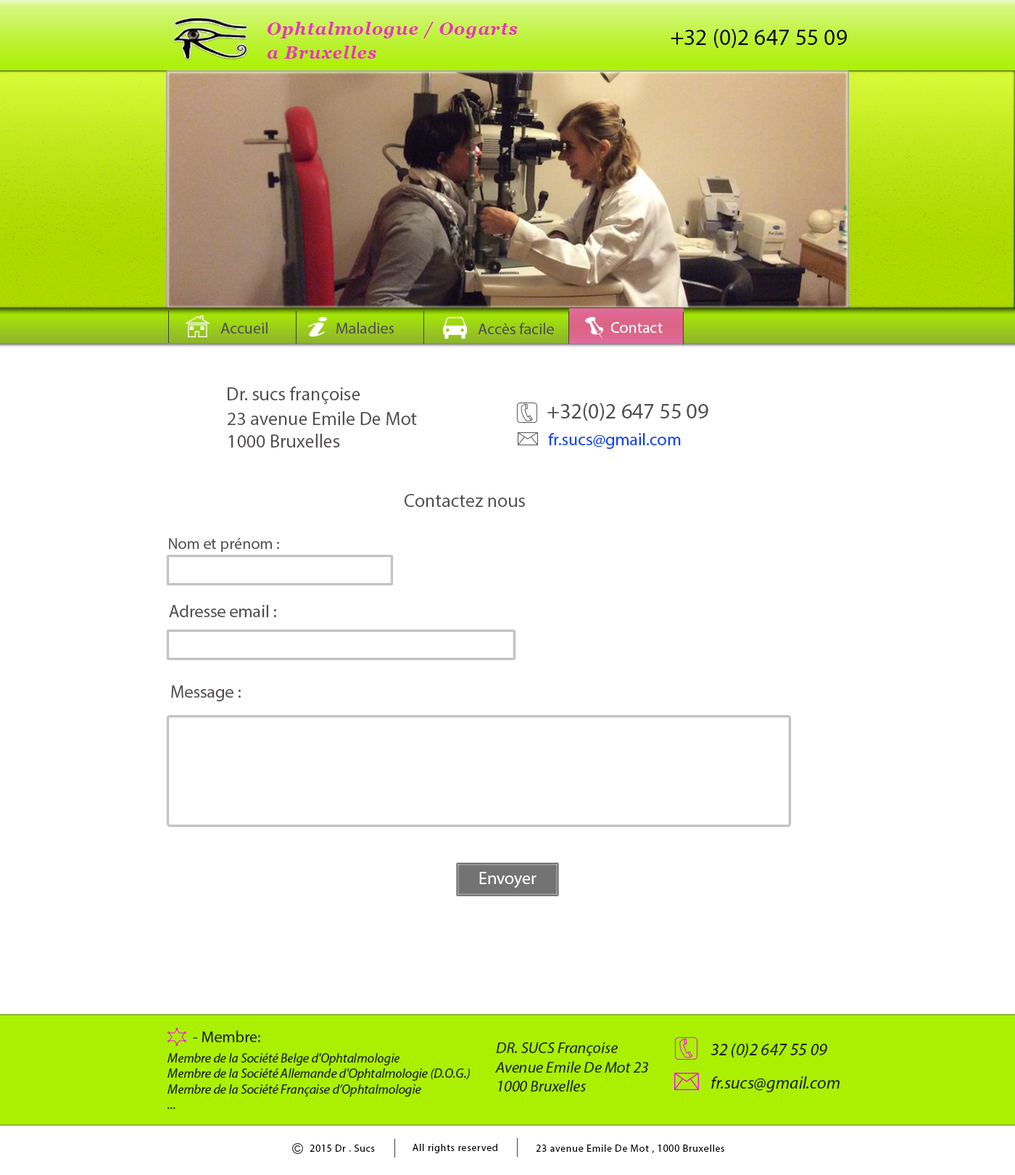
<style>
.page{position:relative;width:1015px;height:1175px;background:#ffffff}
.page>*{position:absolute;margin:0}
.t1{font:17.4px "Georgia-BoldItalic";letter-spacing:0.05em;color:#eb35b7}
.t2{font:23.2px "MyriadPro-Regular";color:#040003}
.t3{font:16px "MyriadPro-Regular";color:#514d50}
.t4{font:16px "MyriadPro-Regular";color:#fdfcfd}
.t5{font:18.9px "MyriadPro-Regular";color:#514d50}
.t6{font:21.8px "MyriadPro-Regular";color:#514d50}
.t7{font:17.4px "MyriadPro-Regular";color:#0840f7}
.t8{font:17.4px "MyriadPro-Regular";color:#514d50}
.t9{font:17.4px "MyriadPro-Regular";color:#fefdfe}
.t10{font:16px "MyriadPro-Regular";color:#191919}
.t11{font:16px "MyriadPro-It";color:#191919}
.t12{font:17.4px "MyriadPro-It";color:#191919}
.t13{font:13.1px "MyriadPro-It";color:#191919}
.t14{font:10.2px "MyriadPro-Regular";letter-spacing:0.05em;color:#000000}
</style>
<div class="page">
<p class="t1" style="left:268px;top:22px;width:250px;height:16px">Ophtalmologue / Oogarts</p>
<p class="t2" style="left:671px;top:29px;width:176px;height:19px">+32 (0)2 647 55 09</p>
<p class="t1" style="left:267px;top:46px;width:109px;height:13px">a Bruxelles</p>
<p class="t3" style="left:220px;top:322px;width:48px;height:12px">Accueil</p>
<p class="t3" style="left:336px;top:322px;width:58px;height:12px">Maladies</p>
<p class="t3" style="left:478px;top:323px;width:76px;height:11px">Accès facile</p>
<p class="t4" style="left:611px;top:322px;width:52px;height:11px">Contact</p>
<p class="t5" style="left:228px;top:386px;width:132px;height:18px">Dr. sucs françoise</p>
<p class="t5" style="left:228px;top:411px;width:189px;height:36px">23 avenue Emile De Mot<br>1000 Bruxelles</p>
<p class="t6" style="left:547px;top:402px;width:161px;height:19px">+32(0)2 647 55 09</p>
<p class="t7" style="left:548px;top:433px;width:133px;height:16px">fr.sucs@gmail.com</p>
<p class="t5" style="left:405px;top:494px;width:120px;height:13px">Contactez nous</p>
<p class="t3" style="left:169px;top:537px;width:110px;height:15px">Nom et prénom :</p>
<p class="t8" style="left:169px;top:605px;width:107px;height:12px">Adresse email :</p>
<p class="t8" style="left:171px;top:685px;width:70px;height:16px">Message :</p>
<p class="t9" style="left:479px;top:872px;width:58px;height:16px">Envoyer</p>
<p class="t10" style="left:193px;top:1030px;width:67px;height:12px">- Membre:</p>
<p class="t11" style="left:495px;top:1042px;width:154px;height:49px">DR. SUCS Françoise<br>Avenue Emile De Mot 23<br>1000 Bruxelles</p>
<p class="t12" style="left:711px;top:1043px;width:116px;height:14px">32 (0)2 647 55 09</p>
<p class="t13" style="left:167px;top:1053px;width:303px;height:56px">Membre de la Société Belge d'Ophtalmologie<br>    Membre de la Société Allemande d'Ophtalmologie (D.O.G.)<br>    Membre de la Société Française d’Ophtalmologie<br>    ...</p>
<p class="t12" style="left:711px;top:1076px;width:129px;height:16px">fr.sucs@gmail.com</p>
<p class="t14" style="left:310px;top:1144px;width:65px;height:7px">2015 Dr . Sucs</p>
<p class="t14" style="left:413px;top:1143px;width:84px;height:10px">All rights reserved</p>
<p class="t14" style="left:536px;top:1144px;width:188px;height:9px">23 avenue Emile De Mot , 1000 Bruxelles</p>
</div>
